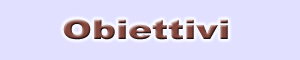
<style>
.page{position:relative;width:300px;height:60px;background:#e1e1ff}
.page>*{position:absolute;margin:0}
.t1{font:27px "Arial-Black";scale:1.33 1}
</style>
<div class="page">
<p class="t1" style="left:63px;top:19px;width:165px;height:21px">Obiettivi</p>
</div>
